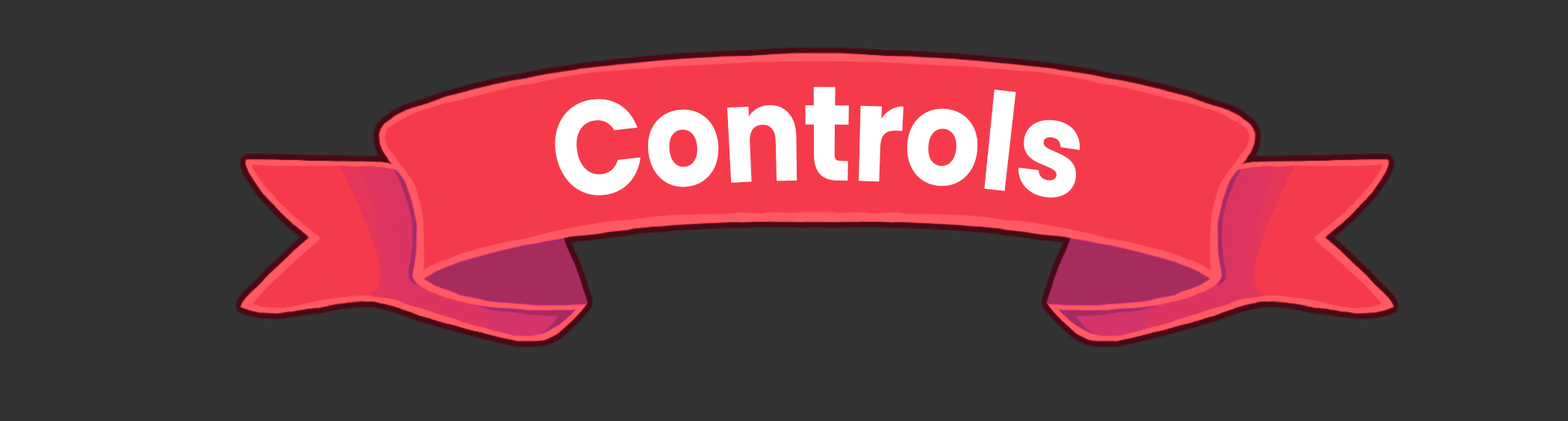
<style>
.page{position:relative;width:1568px;height:421px;background:#333333}
.page>*{position:absolute;margin:0}
.t1{font:134.4px "Poppins-Bold";color:#ffffff;scale:0.83 1}
</style>
<div class="page">
<p class="t1" style="left:555px;top:87px;width:525px;height:111px">Controls</p>
</div>
